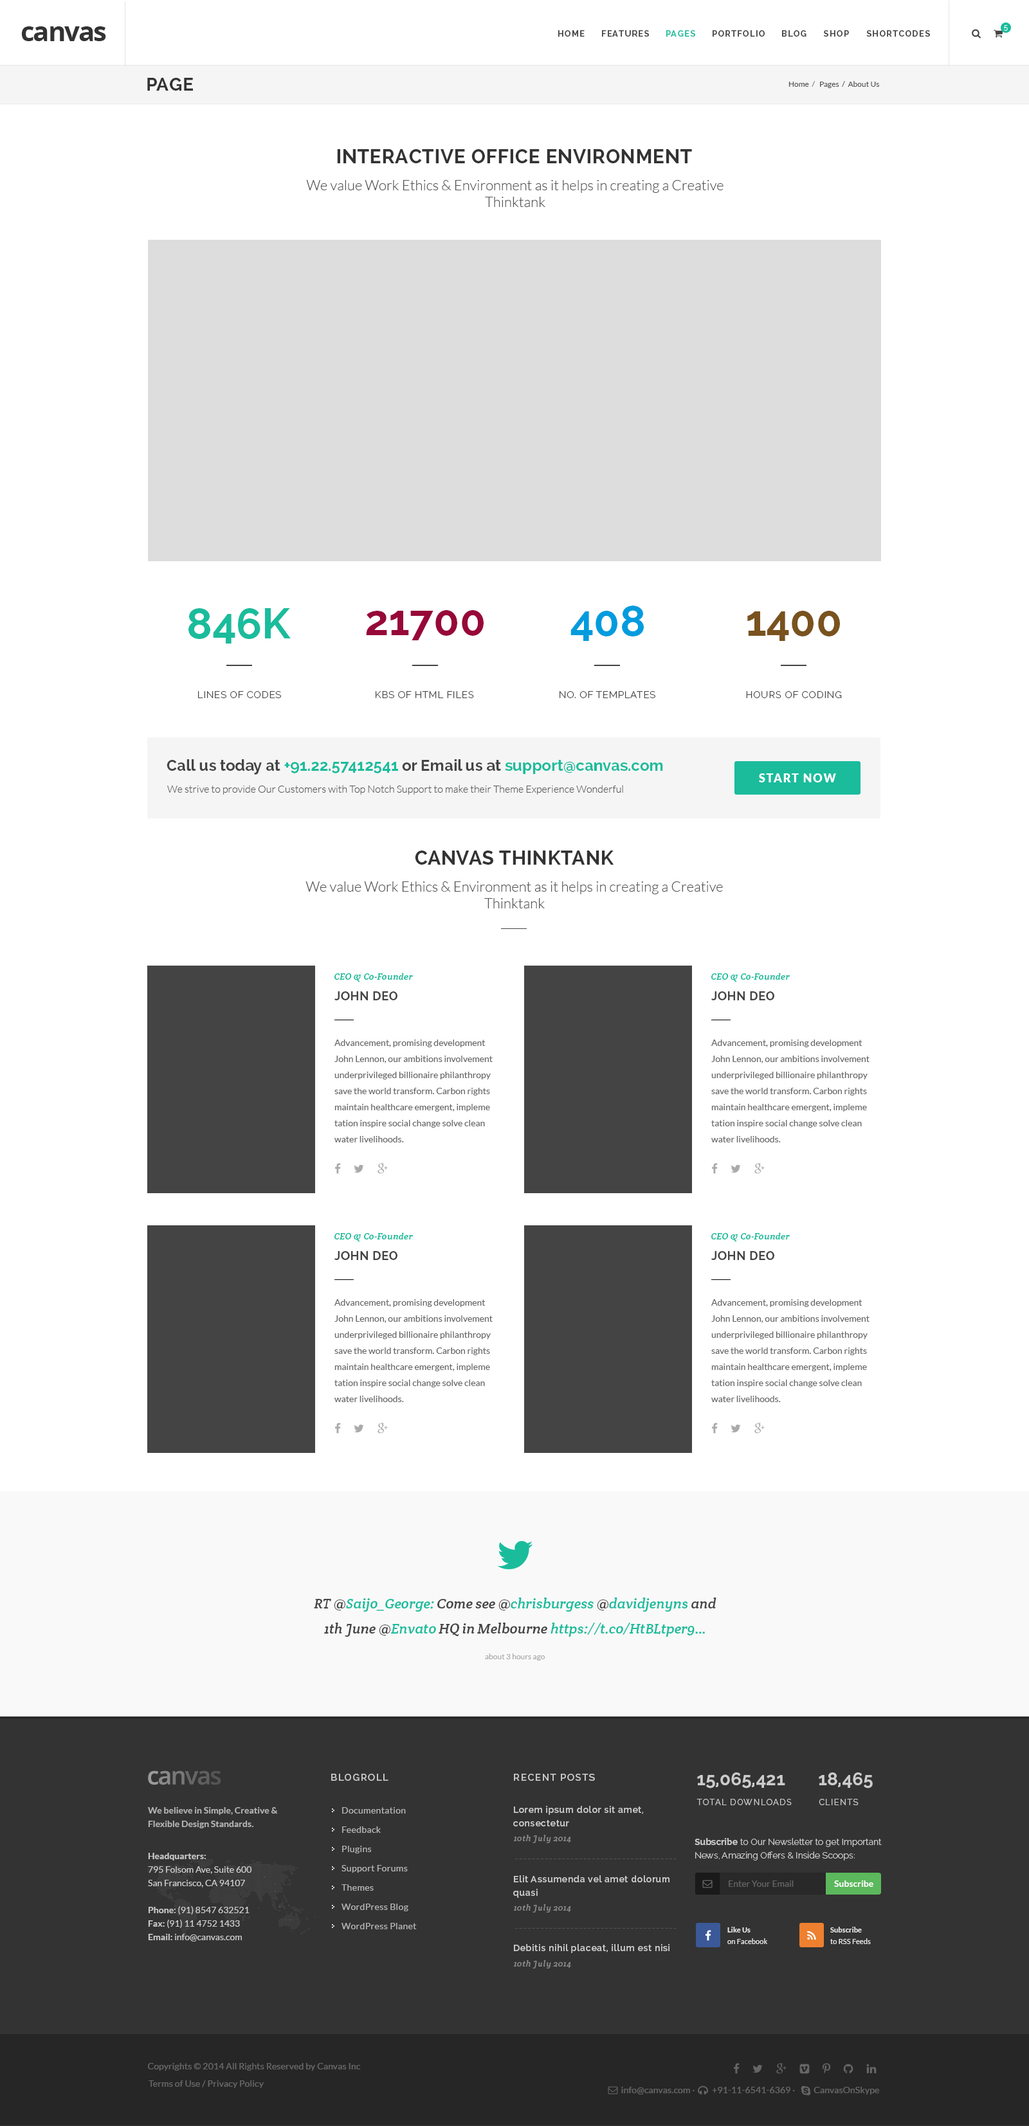
<style>
.page{position:relative;width:1029px;height:2126px;background:#ffffff}
.page>*{position:absolute;margin:0}
.t1{font:27px "OpenSans-Bold";letter-spacing:-0.05em;color:#333333}
.t2{font:7.1px "Raleway-Light";letter-spacing:0.1em;color:#ffffff}
.t3{font:8.4px "Raleway-Bold";letter-spacing:0.1em;color:#444444}
.t4{font:8.4px "Raleway-Bold";letter-spacing:0.1em;color:#1abc9c}
.t5{font:18px "Raleway-Bold";letter-spacing:0.025em;color:#333333;text-transform:uppercase}
.t6{font:7.7px "Lato-Regular";color:#555555}
.t7{font:7.7px "Lato-Regular";color:#777777}
.t8{font:19.3px "Raleway-Bold";letter-spacing:0.025em;color:#333333}
.t9{font:14.1px "Lato-Light";color:#555555}
.t10{font:42.4px "Raleway-Bold";color:#009cde}
.t11{font:42.4px "Raleway-Bold";color:#1abc9c}
.t12{font:42.4px "Raleway-Bold";color:#970839}
.t13{font:42.4px "Raleway-Bold";color:#79521e}
.t14{font:9.6px "Raleway-Light";letter-spacing:0.05em;color:#444444}
.t15{font:15.4px "Raleway-Bold";color:#1abc9c}
.t16{font:15.4px "Raleway-Bold";color:#444444}
.t17{font:11.6px "Lato-Black";letter-spacing:0.1em;color:#ffffff;text-transform:uppercase}
.t18{font:10.3px "Lato-Light";color:#555555}
.t19{font:9px "CreteRound-Italic";letter-spacing:0.025em;color:#1abc9c}
.t20{font:12.2px "Raleway-Bold";letter-spacing:0.025em;color:#444444;text-transform:uppercase}
.t21{font:9px/16.1px "Lato-Regular";color:#666666}
.t22{font:14.1px/25.1px "CreteRound-Italic";color:#1abc9c}
.t23{font:14.1px/25.1px "CreteRound-Italic";color:#444444}
.t24{font:7.7px "Lato-Regular";color:#aaaaaa}
.t25{font:9.6px "Raleway-SemiBold";letter-spacing:0.1em;color:#cccccc}
.t26{font:18px "Raleway-Bold";color:#cccccc}
.t27{font:9px/13.5px "Raleway-SemiBold";letter-spacing:0.05em;color:#cccccc}
.t28{font:8.4px "Raleway-Regular";letter-spacing:0.1em;color:#cacaca;text-transform:uppercase}
.t29{font:9px/13.5px "Lato-Bold";color:#cccccc}
.t30{font:9px/19.3px "Lato-Regular";letter-spacing:0.025em;color:#cccccc}
.t31{font:8.4px "CreteRound-Italic";letter-spacing:0.05em;color:#888888}
.t32{font:9px/13.5px "Raleway-Light";color:#cccccc}
.t33{font:9px/13.5px "Raleway-Bold";color:#cccccc}
.t34{font:9px/13.5px "Lato-Regular";color:#cccccc}
.t35{font:11.6px "Lato-Italic";letter-spacing:0.05em;color:#545454}
.t36{font:9px "Lato-Regular";color:#777777}
.t37{font:9px "Lato-Bold";color:#ffffff}
.t38{font:7.1px/11.6px "Lato-Regular";letter-spacing:0.01em;color:#eeeeee}
.t39{font:7.1px/11.6px "Lato-Bold";letter-spacing:0.01em;color:#eeeeee}
.t40{font:9px "Raleway-SemiBold";letter-spacing:0.05em;color:#cccccc}
.t41{font:9px "Lato-Regular";letter-spacing:0.01em;color:#666666}
</style>
<div class="page">
<p class="t1" style="left:21px;top:26px;width:85px;height:15px">canvas</p>
<p class="t2" style="left:1004px;top:25px;width:3px;height:6px">5</p>
<p class="t3" style="left:558px;top:30px;width:26px;height:7px">HOME</p>
<p class="t3" style="left:602px;top:30px;width:47px;height:7px">FEATURES</p>
<p class="t4" style="left:666px;top:30px;width:29px;height:7px">PAGES</p>
<p class="t3" style="left:712px;top:30px;width:52px;height:7px">PORTFOLIO</p>
<p class="t3" style="left:782px;top:30px;width:24px;height:7px">BLOG</p>
<p class="t3" style="left:824px;top:30px;width:25px;height:7px">SHOP</p>
<p class="t3" style="left:866px;top:30px;width:64px;height:7px">SHORTCODES</p>
<p class="t5" style="left:147px;top:78px;width:46px;height:13px">Page</p>
<p class="t6" style="left:788px;top:81px;width:91px;height:7px">Home  <span class="t7">/ </span>  Pages  /  About Us</p>
<p class="t8" style="left:337px;top:149px;width:355px;height:14px">INTERACTIVE OFFICE ENVIRONMENT</p>
<p class="t9" style="left:306px;top:180px;width:417px;height:27px;text-align:center">We value Work Ethics &amp; Environment as it helps in creating a Creative<br>Thinktank</p>
<p class="t10" style="left:570px;top:606px;width:74px;height:35px">408</p>
<p class="t11" style="left:188px;top:608px;width:103px;height:36px">846K</p>
<p class="t12" style="left:366px;top:610px;width:117px;height:30px">21700</p>
<p class="t13" style="left:747px;top:611px;width:93px;height:30px">1400</p>
<p class="t14" style="left:198px;top:691px;width:83px;height:7px">LINES OF CODES</p>
<p class="t14" style="left:375px;top:691px;width:99px;height:7px">KBS OF HTML FILES</p>
<p class="t14" style="left:559px;top:691px;width:96px;height:7px">NO. OF TEMPLATES</p>
<p class="t14" style="left:746px;top:691px;width:96px;height:7px">HOURS OF CODING</p>
<p class="t15" style="left:166px;top:759px;width:497px;height:16px"><span class="t16">Call us today at </span>+91.22.57412541<span class="t16"> or Email us at </span>support@canvas.com</p>
<p class="t17" style="left:759px;top:773px;width:77px;height:9px">Start Now</p>
<p class="t18" style="left:167px;top:785px;width:456px;height:10px">We strive to provide Our Customers with Top Notch Support to make their Theme Experience Wonderful</p>
<p class="t8" style="left:415px;top:851px;width:199px;height:14px">CANVAS THINKTANK</p>
<p class="t9" style="left:305px;top:881px;width:418px;height:27px;text-align:center">We value Work Ethics &amp; Environment as it helps in creating a Creative<br>Thinktank</p>
<p class="t19" style="left:334px;top:973px;width:79px;height:9px">CEO &amp; Co-Founder</p>
<p class="t19" style="left:711px;top:973px;width:78px;height:9px">CEO &amp; Co-Founder</p>
<p class="t20" style="left:334px;top:991px;width:63px;height:9px">John Deo</p>
<p class="t20" style="left:711px;top:991px;width:63px;height:9px">John Deo</p>
<p class="t21" style="left:334px;top:1040px;width:158px;height:102px">Advancement, promising development<br>John Lennon, our ambitions involvement<br>underprivileged billionaire philanthropy<br>save the world transform. Carbon rights<br>maintain healthcare emergent, impleme<br>tation inspire social change solve clean<br>water livelihoods.</p>
<p class="t21" style="left:711px;top:1040px;width:158px;height:102px">Advancement, promising development<br>John Lennon, our ambitions involvement<br>underprivileged billionaire philanthropy<br>save the world transform. Carbon rights<br>maintain healthcare emergent, impleme<br>tation inspire social change solve clean<br>water livelihoods.</p>
<p class="t19" style="left:334px;top:1232px;width:79px;height:10px">CEO &amp; Co-Founder</p>
<p class="t19" style="left:711px;top:1232px;width:78px;height:10px">CEO &amp; Co-Founder</p>
<p class="t20" style="left:334px;top:1251px;width:63px;height:9px">John Deo</p>
<p class="t20" style="left:711px;top:1251px;width:63px;height:9px">John Deo</p>
<p class="t21" style="left:334px;top:1299px;width:158px;height:103px">Advancement, promising development<br>John Lennon, our ambitions involvement<br>underprivileged billionaire philanthropy<br>save the world transform. Carbon rights<br>maintain healthcare emergent, impleme<br>tation inspire social change solve clean<br>water livelihoods.</p>
<p class="t21" style="left:711px;top:1299px;width:158px;height:103px">Advancement, promising development<br>John Lennon, our ambitions involvement<br>underprivileged billionaire philanthropy<br>save the world transform. Carbon rights<br>maintain healthcare emergent, impleme<br>tation inspire social change solve clean<br>water livelihoods.</p>
<p class="t22" style="left:314px;top:1598px;width:402px;height:39px;text-align:center"><span class="t23">RT @</span>Saijo_George:<span class="t23"> Come see @</span>chrisburgess<span class="t23"> @</span>davidjenyns<span class="t23"> and<br>1th June @</span>Envato<span class="t23"> HQ in Melbourne </span>https://t.co/HtBLtper9…</p>
<p class="t24" style="left:485px;top:1653px;width:60px;height:8px">about 3 hours ago</p>
<p class="t25" style="left:331px;top:1774px;width:57px;height:7px">BLOGROLL</p>
<p class="t25" style="left:514px;top:1774px;width:81px;height:7px">RECENT POSTS</p>
<p class="t26" style="left:697px;top:1772px;width:88px;height:16px">15,065,421</p>
<p class="t26" style="left:818px;top:1772px;width:54px;height:16px">18,465</p>
<p class="t27" style="left:513px;top:1806px;width:130px;height:20px">Lorem ipsum dolor sit amet,<br>consectetur</p>
<p class="t28" style="left:696px;top:1799px;width:95px;height:6px">TOTAL Downloads</p>
<p class="t28" style="left:818px;top:1799px;width:40px;height:6px">CLIENTS</p>
<p class="t29" style="left:148px;top:1807px;width:130px;height:21px;opacity:0.8">We believe in Simple, Creative &amp;<br>Flexible Design Standards.</p>
<p class="t30" style="left:341px;top:1807px;width:76px;height:122px;opacity:0.8">Documentation<br>Feedback<br>Plugins<br>Support Forums<br>Themes<br>WordPress Blog<br>WordPress Planet</p>
<p class="t31" style="left:513px;top:1835px;width:58px;height:8px">10th July 2014</p>
<p class="t32" style="left:694px;top:1838px;width:187px;height:22px"><span class="t33">Subscribe</span> to Our Newsletter to get Important<br>News, Amazing Offers &amp; Inside Scoops:</p>
<p class="t34" style="left:148px;top:1853px;width:104px;height:88px"><span class="t29">Headquarters:<br></span>795 Folsom Ave, Suite 600<br>San Francisco, CA 94107<br><span class="t29"><br>Phone: </span>(91) 8547 632521<br><span class="t29">Fax: </span>(91) 11 4752 1433<br><span class="t29">Email: </span>info@canvas.com</p>
<p class="t35" style="left:514px;top:1859px;width:162px;height:0px">--------------------------------------</p>
<p class="t27" style="left:513px;top:1875px;width:156px;height:23px">Elit Assumenda vel amet dolorum<br>quasi</p>
<p class="t36" style="left:728px;top:1880px;width:65px;height:7px;opacity:0.7">Enter Your Email</p>
<p class="t37" style="left:834px;top:1880px;width:39px;height:7px">Subscribe</p>
<p class="t31" style="left:513px;top:1904px;width:58px;height:9px">10th July 2014</p>
<p class="t35" style="left:514px;top:1928px;width:162px;height:1px">--------------------------------------</p>
<p class="t38" style="left:727px;top:1927px;width:40px;height:17px"><span class="t39">Like Us<br></span>on Facebook</p>
<p class="t38" style="left:830px;top:1927px;width:40px;height:17px"><span class="t39">Subscribe<br></span>to RSS Feeds</p>
<p class="t40" style="left:514px;top:1944px;width:155px;height:9px">Debitis nihil placeat, illum est nisi</p>
<p class="t31" style="left:513px;top:1960px;width:58px;height:8px">10th July 2014</p>
<p class="t41" style="left:148px;top:2063px;width:212px;height:8px">Copyrights © 2014 All Rights Reserved by Canvas Inc</p>
<p class="t41" style="left:148px;top:2080px;width:116px;height:8px">Terms of Use / Privacy Policy</p>
<p class="t41" style="left:621px;top:2087px;width:258px;height:7px">info@canvas.com ·   +91-11-6541-6369 ·        CanvasOnSkype</p>
</div>
